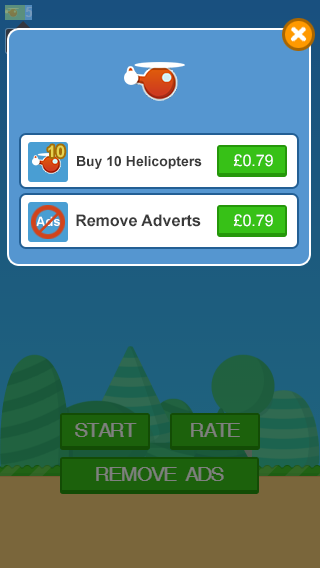
<style>
.page{position:relative;width:320px;height:568px;background:#5596d0}
.page>*{position:absolute;margin:0}
.t1{font:16px "Arial-BoldMT";color:#e5d251}
.t2{font:14px "Arial-BoldMT";color:#3a3a3a}
.t3{font:16px "ArialMT";color:#ffffff}
.t4{font:13px "Arial-BoldMT";color:#ffffff}
.t5{font:16px "Arial-BoldMT";color:#3a3a3a}
</style>
<div class="page">
<p class="t1" style="left:48px;top:145px;width:17px;height:13px">10</p>
<p class="t2" style="left:77px;top:156px;width:125px;height:13px">Buy 10 Helicopters</p>
<p class="t3" style="left:233px;top:154px;width:40px;height:13px">£0.79</p>
<p class="t4" style="left:36px;top:216px;width:24px;height:10px">Ads</p>
<p class="t5" style="left:76px;top:214px;width:125px;height:13px">Remove Adverts</p>
<p class="t3" style="left:233px;top:214px;width:40px;height:13px">£0.79</p>
</div>
